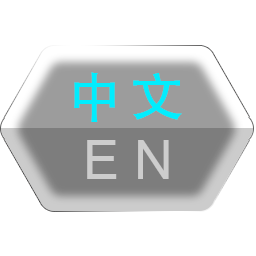
<style>
.page{position:relative;width:256px;height:256px;background:#ffffff}
.page>*{position:absolute;margin:0}
.t1{font:54.2px "STHeiti";letter-spacing:0.14em;color:#01edfe}
.t2{font:54.2px "ArialMT";letter-spacing:0.26em;color:#cdcdcd}
</style>
<div class="page">
<p class="t1" style="left:74px;top:72px;width:108px;height:50px">中文</p>
<p class="t2" style="left:87px;top:140px;width:82px;height:39px">EN</p>
</div>
